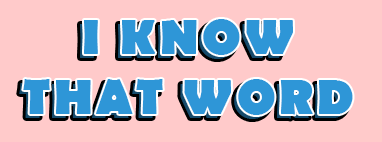
<style>
.page{position:relative;width:382px;height:142px;background:#ffcaca}
.page>*{position:absolute;margin:0}
.t1{font:50px "BerlinSansFB-Bold";letter-spacing:0.075em}
.t2{font:50px "BerlinSansFB-Bold";letter-spacing:0.075em;color:#2e96d7}
</style>
<div class="page">
<p class="t1" style="left:19px;top:23px;width:330px;height:96px;text-align:center">I KNOW<br>THAT WORD</p>
<p class="t2" style="left:23px;top:19px;width:330px;height:96px;text-align:center">I KNOW<br>THAT WORD</p>
</div>
